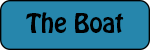
<style>
.page{position:relative;width:150px;height:50px;background:#2686ac}
.page>*{position:absolute;margin:0}
.t1{font:24px "HoboStd";color:#000000}
</style>
<div class="page">
<p class="t1" style="left:26px;top:12px;width:98px;height:21px">The Boat</p>
</div>
